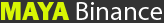
<style>
.page{position:relative;width:164px;height:23px;background:#333333}
.page>*{position:absolute;margin:0}
.t1{font:26.7px "MyriadPro-Regular";color:#ffffff}
.t2{font:26.7px "FranklinGothic-Heavy";color:#d7f603}
</style>
<div class="page">
<p class="t1" style="left:1px;top:2px;width:161px;height:18px"><span class="t2">MAYA</span> Binance</p>
</div>
